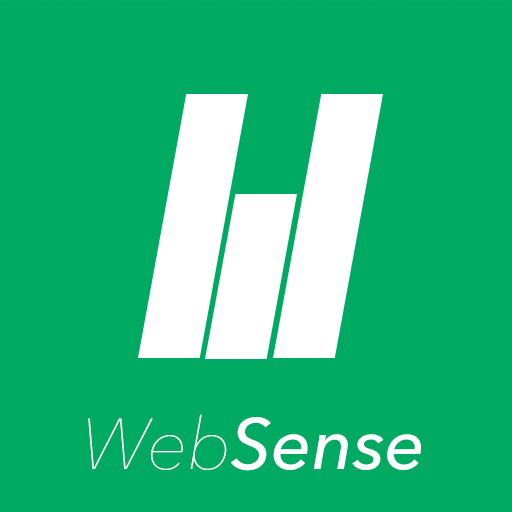
<style>
.page{position:relative;width:512px;height:512px;background:#00aa63}
.page>*{position:absolute;margin:0}
.t1{font:71.5px "AvenirNext-MediumItalic";color:#ffffff}
.t2{font:71.5px "AvenirNext-UltraLightItalic";color:#ffffff}
</style>
<div class="page">
<p class="t1" style="left:88px;top:414px;width:333px;height:57px"><span class="t2">Web</span>Sense</p>
</div>
